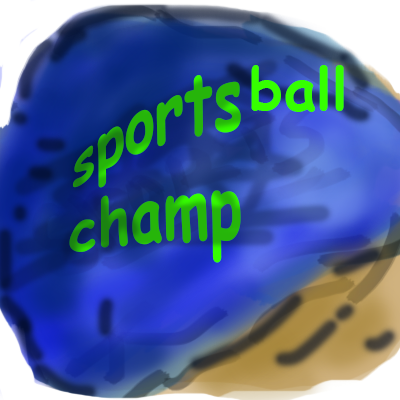
<style>
.page{position:relative;width:400px;height:400px}
.page>*{position:absolute;margin:0}
.t1{font:58.3px "ComicSansMS-Bold";color:#36ff00}
.t2{font:58.3px "ComicSansMS-Bold"}
</style>
<div class="page">
<p class="t1" style="left:251px;top:65px;width:93px;height:47px">ball</p>
<p class="t2" style="left:69px;top:75px;width:172px;height:188px">sports<br>champ</p>
</div>
